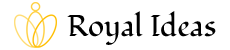
<style>
.page{position:relative;width:230px;height:50px;background:#ffffff}
.page>*{position:absolute;margin:0}
.t1{font:30px "Fondamento-Regular";color:#000000}
</style>
<div class="page">
<p class="t1" style="left:67px;top:11px;width:149px;height:34px">Royal Ideas</p>
</div>
